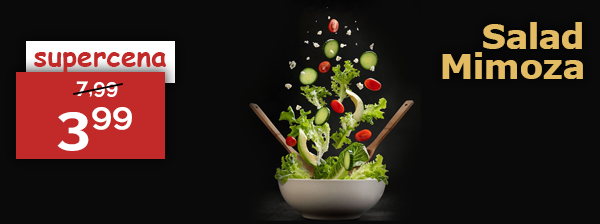
<style>
.page{position:relative;width:600px;height:224px;background:#0a0a0a}
.page>*{position:absolute;margin:0}
.t1{font:35px/30px "Tahoma-Bold";color:#e3bb63;scale:1.06 1}
.t2{font:35px/18px "Tahoma-Bold";color:#e3bb63;scale:1.06 1}
.t3{font:27.9px "ComicSansMS-Bold";color:#c12a29}
.t4{font:21.4px "Raleway-Bold";color:#ffffff}
.t5{font:54.1px "Raleway-Bold";color:#ffffff;scale:1.14 1}
</style>
<div class="page">
<p class="t1" style="left:442px;top:22px;width:141px;height:57px;text-align:right"><span class="t2">S</span>alad<br>Mim<span class="t2">oza</span></p>
<p class="t3" style="left:34px;top:52px;width:132px;height:22px">supercena</p>
<p class="t4" style="left:76px;top:81px;width:42px;height:16px">7,99</p>
<p class="t5" style="left:57px;top:107px;width:75px;height:44px">399</p>
</div>
